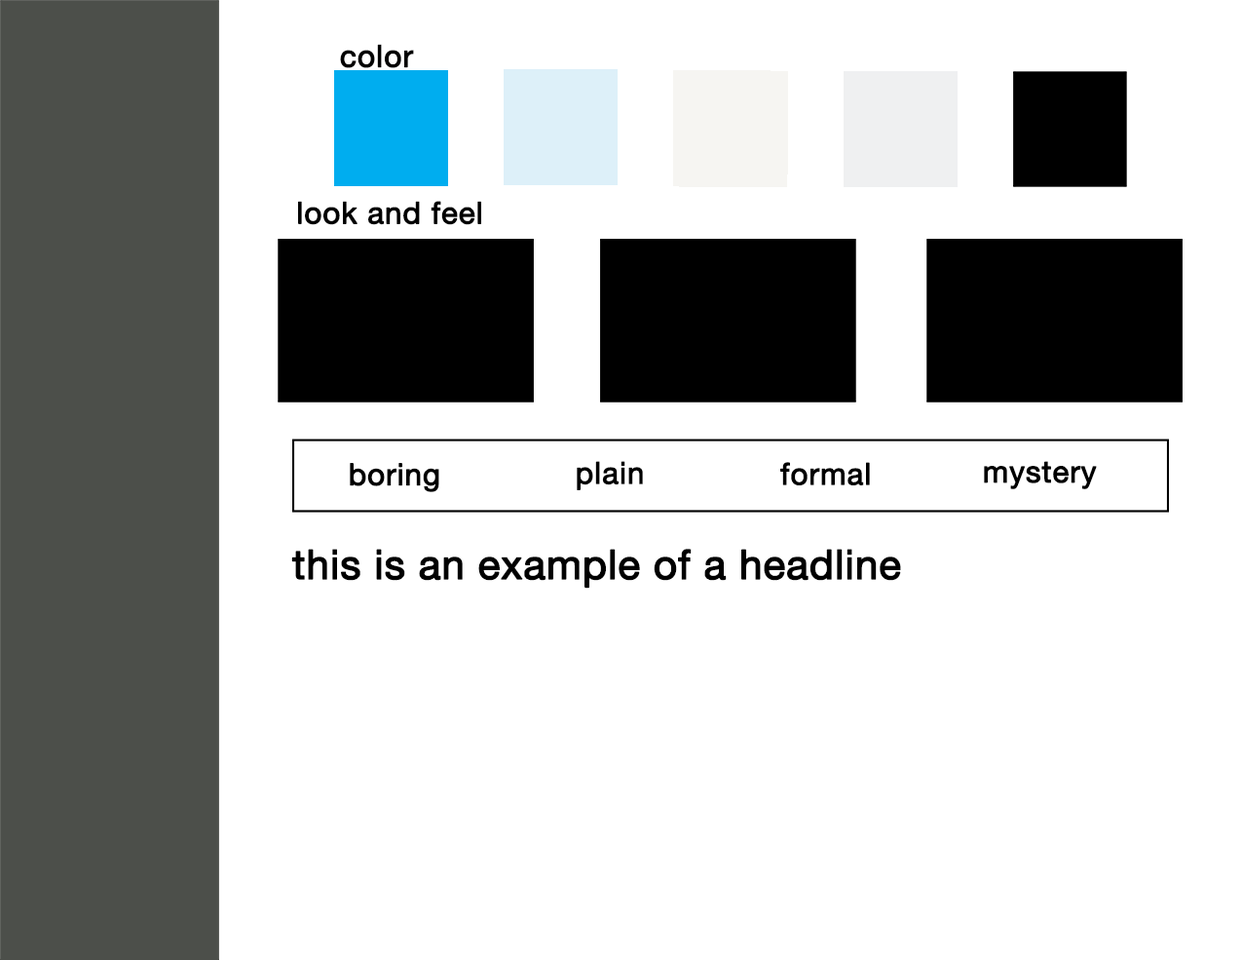
<style>
.page{position:relative;width:1242px;height:960px;background:#ffffff}
.page>*{position:absolute;margin:0}
.t1{font:30.6px "HelveticaNeue";letter-spacing:0.01em;color:#000000;font-weight:bold}
.t2{font:30.2px "HelveticaNeue";letter-spacing:0.01em;color:#000000;font-weight:bold}
.t3{font:40.9px "HelveticaNeue";color:#000000;font-weight:bold}
</style>
<div class="page">
<p class="t1" style="left:340px;top:44px;width:74px;height:24px">color</p>
<p class="t2" style="left:298px;top:201px;width:183px;height:24px">look and feel</p>
<p class="t2" style="left:577px;top:461px;width:66px;height:29px">plain</p>
<p class="t2" style="left:781px;top:462px;width:89px;height:23px">formal</p>
<p class="t2" style="left:984px;top:461px;width:113px;height:28px">mystery</p>
<p class="t2" style="left:350px;top:463px;width:89px;height:29px">boring</p>
<p class="t3" style="left:291px;top:549px;width:610px;height:40px">this is an example of a headline</p>
</div>
